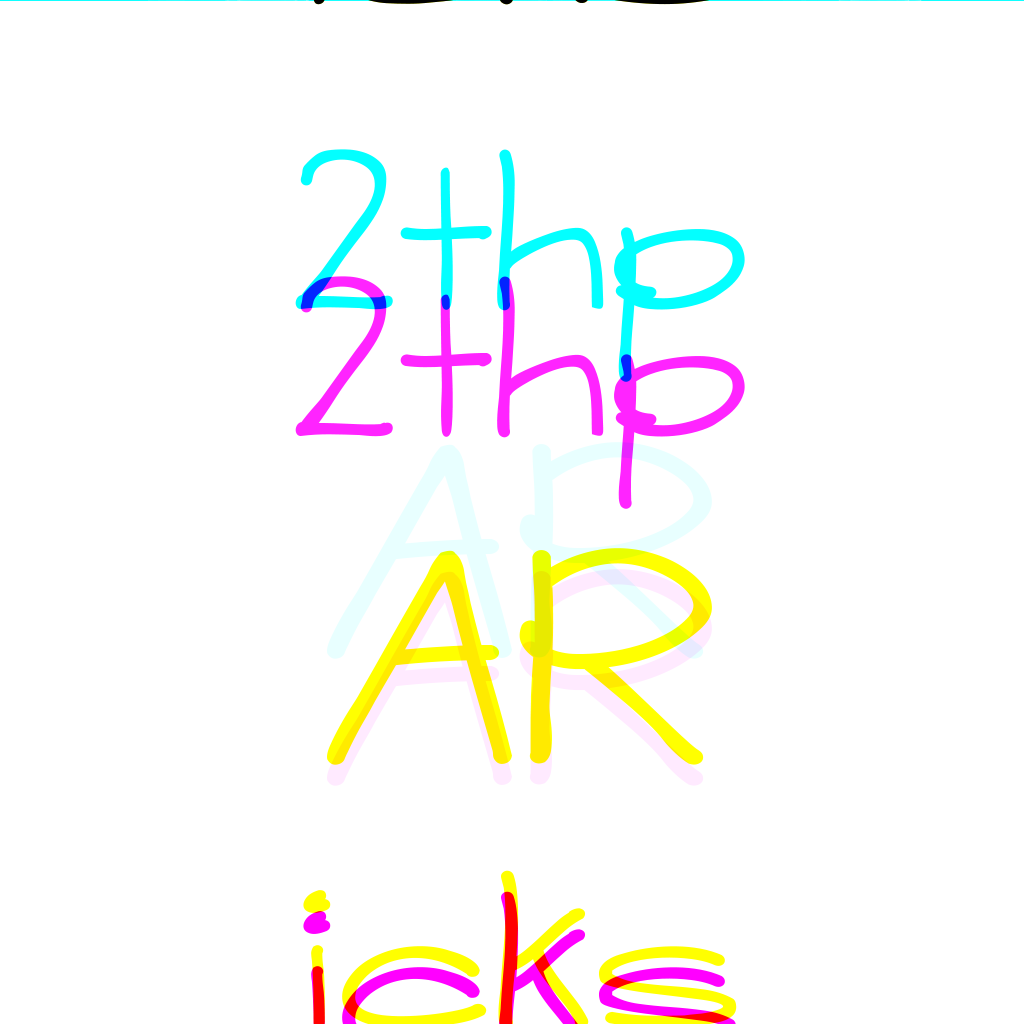
<style>
.page{position:relative;width:1024px;height:1024px;background:#ffffff}
.page>*{position:absolute;margin:0}
.t1{font:286.7px "ASensibleArmadillo";color:#03ffff}
.t2{font:382.3px "ASensibleArmadillo";color:#e8ffff;scale:1.2 1}
</style>
<div class="page">
<p class="t1" style="left:295px;top:148px;width:450px;height:233px">2thp</p>
<p class="t2" style="left:327px;top:441px;width:385px;height:217px">AR</p>
</div>
